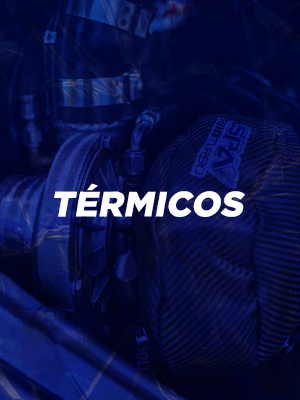
<style>
.page{position:relative;width:300px;height:400px}
.page>*{position:absolute;margin:0}
.t1{font:35px "Gotham-Black";letter-spacing:0.01em;color:#fffefe;text-transform:uppercase;font-style:italic}
</style>
<div class="page">
<p class="t1" style="left:54px;top:183px;width:191px;height:34px">térmicos</p>
</div>
